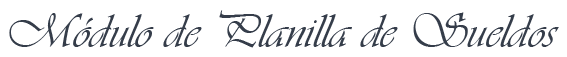
<style>
.page{position:relative;width:567px;height:57px;background:#ffffff}
.page>*{position:absolute;margin:0}
.t1{font:50px "Vivaldii";color:#353d4a}
</style>
<div class="page">
<p class="t1" style="left:9px;top:10px;width:550px;height:38px">Módulo de Planilla de Sueldos</p>
</div>
